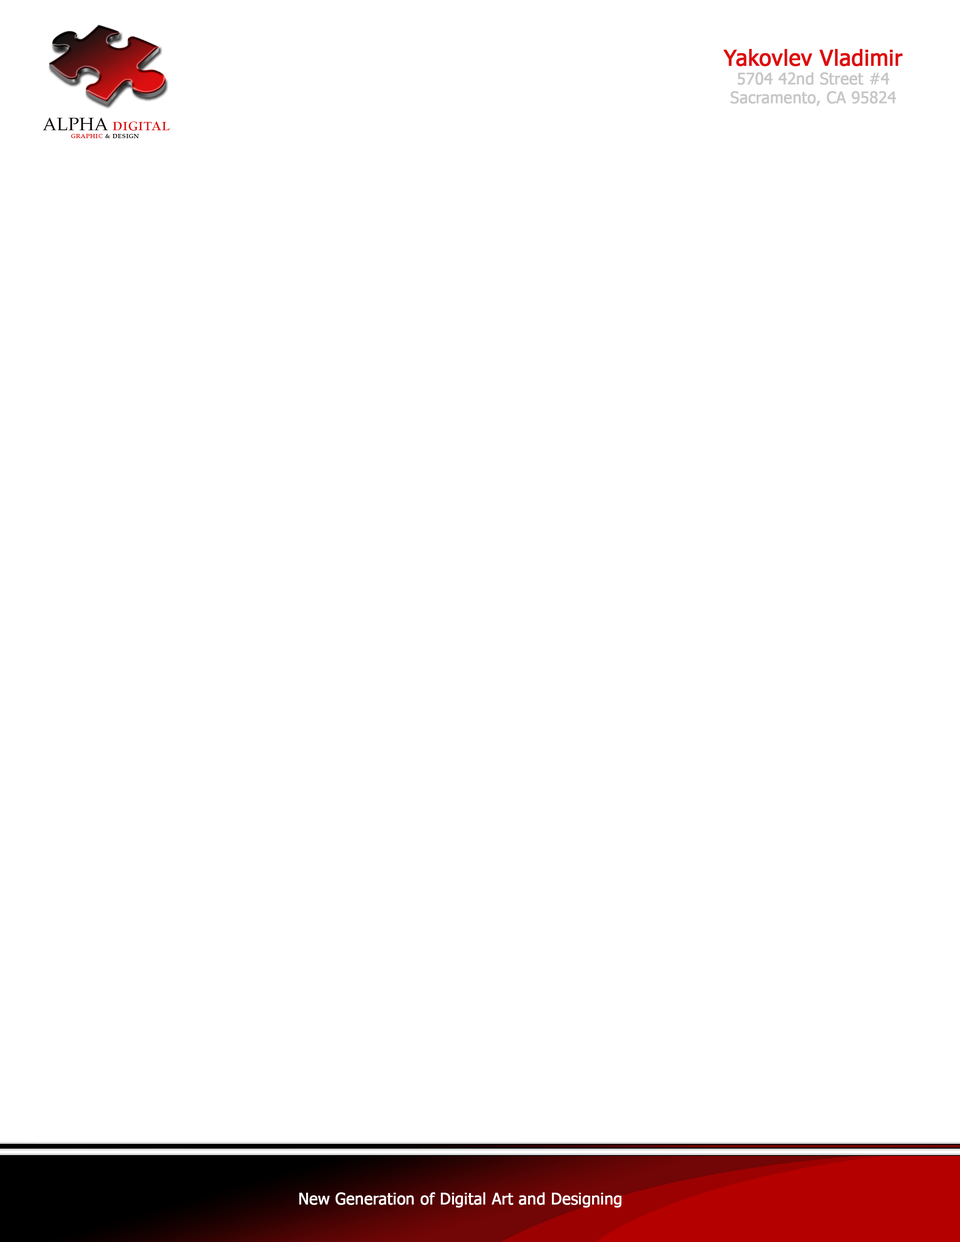
<style>
.page{position:relative;width:960px;height:1242px;background:#ffffff}
.page>*{position:absolute;margin:0}
.t1{font:15.7px "Tahoma";color:#c7c7c7;font-weight:bold}
.t2{font:22px "Tahoma";color:#dd0f10;font-weight:bold}
.t3{font:18.3px "PalatinoLinotype-Roman";color:#da0f10;font-variant:small-caps}
.t4{font:18.3px "PalatinoLinotype-Roman";color:#0f0707;font-variant:small-caps}
.t5{font:9.1px "PalatinoLinotype-Roman";color:#0f0707;font-variant:small-caps}
.t6{font:9.1px "PalatinoLinotype-Roman";color:#da0f10;font-variant:small-caps}
.t7{font:15.7px "Tahoma";color:#ffffff;font-weight:bold}
</style>
<div class="page">
<p class="t1" style="left:723px;top:49px;width:180px;height:57px;text-align:center"><span class="t2">Yakovlev Vladimir<br></span>5704 42nd Street #4<br>Sacramento, CA 95824</p>
<p class="t3" style="left:43px;top:118px;width:126px;height:13px"><span class="t4">ALPHA </span>digital</p>
<p class="t5" style="left:71px;top:134px;width:68px;height:4px"><span class="t6">graphic </span>&amp; design</p>
<p class="t7" style="left:299px;top:1193px;width:322px;height:15px">New Generation of Digital Art and Designing</p>
</div>
